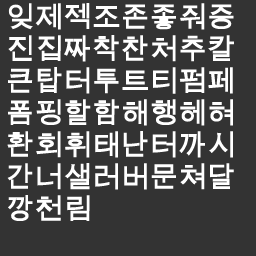
<style>
.page{position:relative;width:256px;height:256px;background:#333333}
.page>*{position:absolute;margin:0}
.t1{font:28px "ArialUnicodeMS";color:#ffffff;font-weight:bold}
</style>
<div class="page">
<p class="t1" style="left:7px;top:3px;width:227px;height:218px">잊제젝조존좋줘증<br>진집짜착찬처추칼<br>큰탑터투트티펌페<br>폼핑할함해행헤혀<br>환회휘태난터까시<br>간너샐러버문쳐달<br>깡천림</p>
</div>
